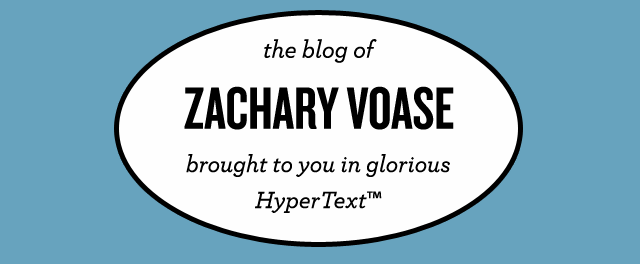
<style>
.page{position:relative;width:640px;height:264px;background:#67a3be}
.page>*{position:absolute;margin:0}
.t1{font:43px "Archer-MediumItalic";color:#000000}
.t2{font:106px "Knockout-HTF48-Featherweight";color:#000000}
.t3{font:42px/36px "Archer-MediumItalic";color:#000000}
.t4{font:42px/36px "MyriadPro-Regular";color:#000000}
</style>
<div class="page">
<p class="t1" style="left:264px;top:39px;width:113px;height:24px">the blog of</p>
<p class="t2" style="left:184px;top:86px;width:270px;height:44px">ZACHARY VOASE</p>
<p class="t3" style="left:186px;top:154px;width:264px;height:59px;text-align:center">brought to you in glorious<br>HyperText<span class="t4">™</span></p>
</div>
